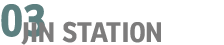
<style>
.page{position:relative;width:224px;height:45px;background:#ffffff}
.page>*{position:absolute;margin:0}
.t1{font:40px "KoreanTITGD5-R";color:#5d8080}
.t2{font:24.8px "KoreanTITGD5-R";color:#7d7c7c}
</style>
<div class="page">
<p class="t1" style="left:1px;top:4px;width:44px;height:33px">03</p>
<p class="t2" style="left:21px;top:21px;width:140px;height:24px">JIN STATION</p>
</div>
